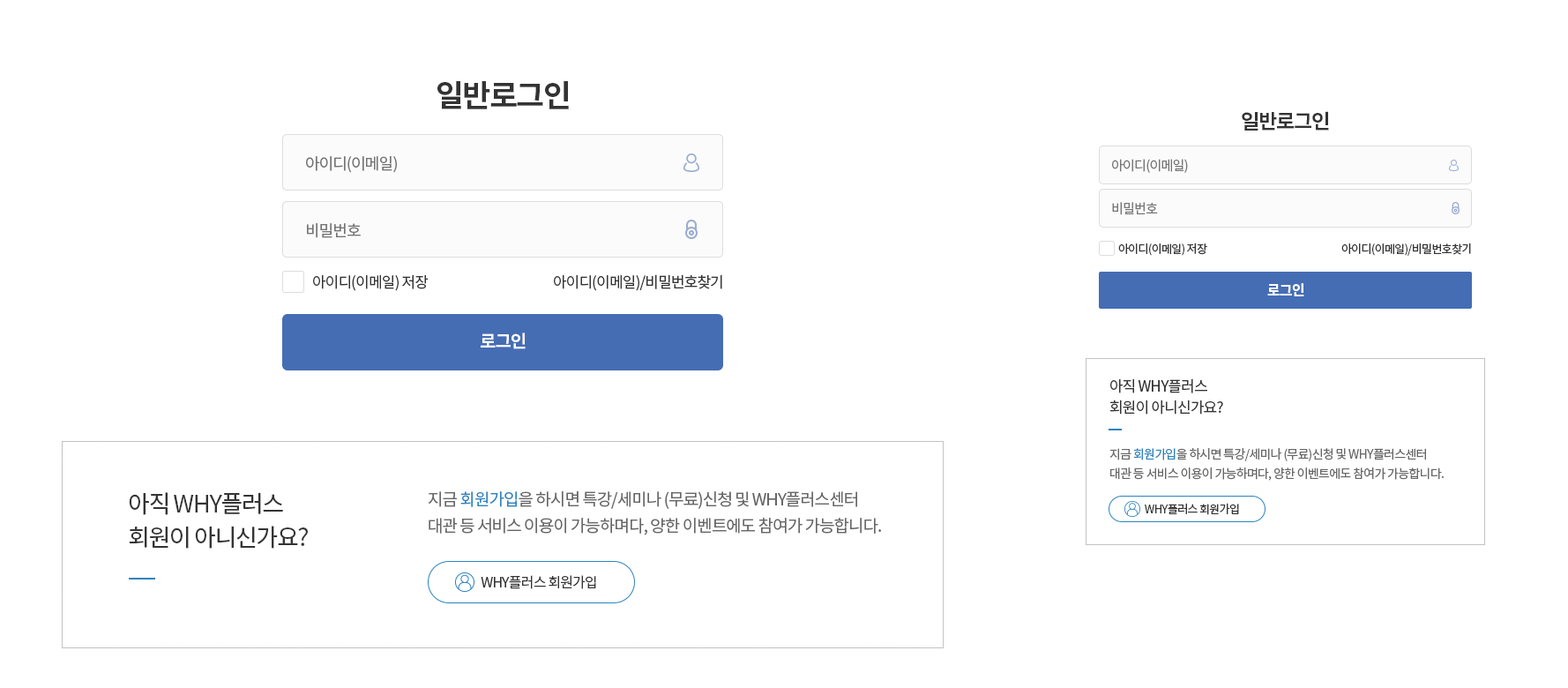
<style>
.page{position:relative;width:1568px;height:688px;background:#ffffff}
.page>*{position:absolute;margin:0}
.t1{font:30.9px "NotoSansKR-Bold";letter-spacing:-0.05em;color:#333333}
.t2{font:20.3px "NotoSansKR-Bold";letter-spacing:-0.05em;color:#333333}
.t3{font:15.9px "NotoSansKR-Regular";letter-spacing:-0.05em;color:#757575}
.t4{font:13.2px "NotoSansKR-Regular";letter-spacing:-0.05em;color:#757575}
.t5{font:11.5px "NotoSansKR-Regular";letter-spacing:-0.05em;color:#333333}
.t6{font:15px "NotoSansKR-Regular";letter-spacing:-0.05em;color:#333333}
.t7{font:14.1px "NotoSansKR-Bold";letter-spacing:-0.05em;color:#ffffff}
.t8{font:17.6px "NotoSansKR-Bold";letter-spacing:-0.05em;color:#ffffff}
.t9{font:15px/21.2px "NotoSansKR-Regular";letter-spacing:-0.05em;color:#333333}
.t10{font:12.3px/19.4px "NotoSansKR-Regular";letter-spacing:-0.05em;color:#666766}
.t11{font:12.3px/19.4px "NotoSansKR-Regular";letter-spacing:-0.05em;color:#2b83be}
.t12{font:23.8px/33.5px "NotoSansKR-Regular";letter-spacing:-0.05em;color:#333333}
.t13{font:16.8px/26.5px "NotoSansKR-Regular";letter-spacing:-0.05em;color:#666766}
.t14{font:16.8px/26.5px "NotoSansKR-Regular";letter-spacing:-0.05em;color:#2b83be}
.t15{font:14.1px "NotoSansKR-Regular";letter-spacing:-0.05em;color:#333333}
</style>
<div class="page">
<p class="t1" style="left:437px;top:81px;width:132px;height:28px">일반로그인</p>
<p class="t2" style="left:1242px;top:111px;width:87px;height:20px">일반로그인</p>
<p class="t3" style="left:306px;top:156px;width:91px;height:17px">아이디(이메일)</p>
<p class="t4" style="left:1112px;top:159px;width:76px;height:14px">아이디(이메일)</p>
<p class="t4" style="left:1112px;top:202px;width:46px;height:13px">비밀번호</p>
<p class="t3" style="left:307px;top:223px;width:54px;height:15px">비밀번호</p>
<p class="t5" style="left:1118px;top:243px;width:89px;height:13px">아이디(이메일) 저장</p>
<p class="t5" style="left:1341px;top:243px;width:130px;height:13px">아이디(이메일)/비밀번호찾기</p>
<p class="t6" style="left:313px;top:274px;width:116px;height:17px">아이디(이메일) 저장</p>
<p class="t6" style="left:554px;top:274px;width:168px;height:17px">아이디(이메일)/비밀번호찾기</p>
<p class="t7" style="left:1267px;top:283px;width:37px;height:13px">로그인</p>
<p class="t8" style="left:481px;top:332px;width:45px;height:17px">로그인</p>
<p class="t9" style="left:1109px;top:378px;width:114px;height:36px">아직 WHY플러스<br>회원이 아니신가요?</p>
<p class="t10" style="left:1109px;top:448px;width:335px;height:33px">지금 <span class="t11">회원가입</span>을 하시면 특강/세미나 (무료)신청 및 WHY플러스센터<br>대관 등 서비스 이용이 가능하며다, 양한 이벤트에도 참여가 가능합니다.</p>
<p class="t12" style="left:129px;top:492px;width:179px;height:57px">아직 WHY플러스<br>회원이 아니신가요?</p>
<p class="t13" style="left:428px;top:491px;width:453px;height:44px">지금 <span class="t14">회원가입</span>을 하시면 특강/세미나 (무료)신청 및 WHY플러스센터<br>대관 등 서비스 이용이 가능하며다, 양한 이벤트에도 참여가 가능합니다.</p>
<p class="t5" style="left:1145px;top:503px;width:94px;height:12px">WHY플러스 회원가입</p>
<p class="t15" style="left:481px;top:575px;width:115px;height:14px">WHY플러스 회원가입</p>
</div>
